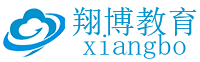
<style>
.page{position:relative;width:200px;height:62px;background:#ffffff}
.page>*{position:absolute;margin:0}
.t1{font:32px "SimSun";color:#0092cd}
.t2{font:30px "SimSun";color:#0092cd}
</style>
<div class="page">
<p class="t1" style="left:72px;top:7px;width:125px;height:29px">翔博教育</p>
<p class="t2" style="left:83px;top:33px;width:103px;height:26px">xiangbo</p>
</div>
